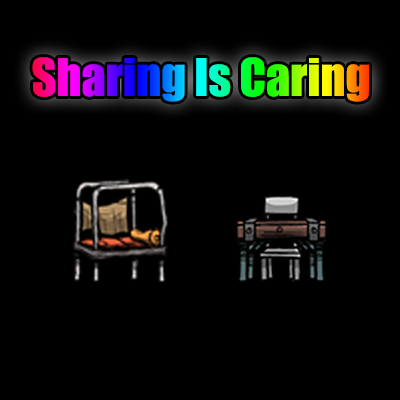
<style>
.page{position:relative;width:400px;height:400px;background:#000000}
.page>*{position:absolute;margin:0}
.t1{font:48px "Impact"}
</style>
<div class="page">
<p class="t1" style="left:32px;top:57px;width:337px;height:45px">Sharing Is Caring</p>
</div>
